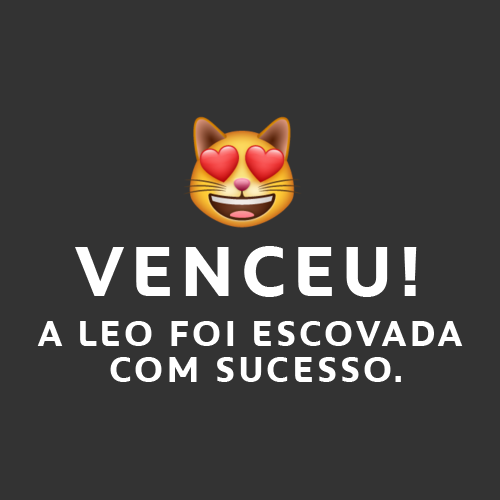
<style>
.page{position:relative;width:500px;height:500px;background:#333333}
.page>*{position:absolute;margin:0}
.t1{font:72px "Peugeot-Bold";letter-spacing:0.075em;color:#ffffff;text-transform:uppercase}
.t2{font:36px/36px "Peugeot-Bold";letter-spacing:0.075em;color:#ffffff;text-transform:uppercase}
</style>
<div class="page">
<p class="t1" style="left:75px;top:246px;width:342px;height:51px">venceu!</p>
<p class="t2" style="left:37px;top:321px;width:426px;height:61px;text-align:center">A LEO FOI ESCOVADA<br> COM SUCESSO.</p>
</div>
